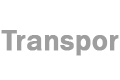
<style>
.page{position:relative;width:120px;height:80px;background:#ffffff}
.page>*{position:absolute;margin:0}
.t1{font:30px "FranklinGothic-Medium";color:#9e9e9e;font-weight:bold}
.t2{font:17.9px "ArialMT";color:#cc232b;scale:1.06 1}
</style>
<div class="page">
<p class="t1" style="left:1px;top:30px;width:118px;height:26px"><span class="t2"><br></span>Transpor</p>
</div>
